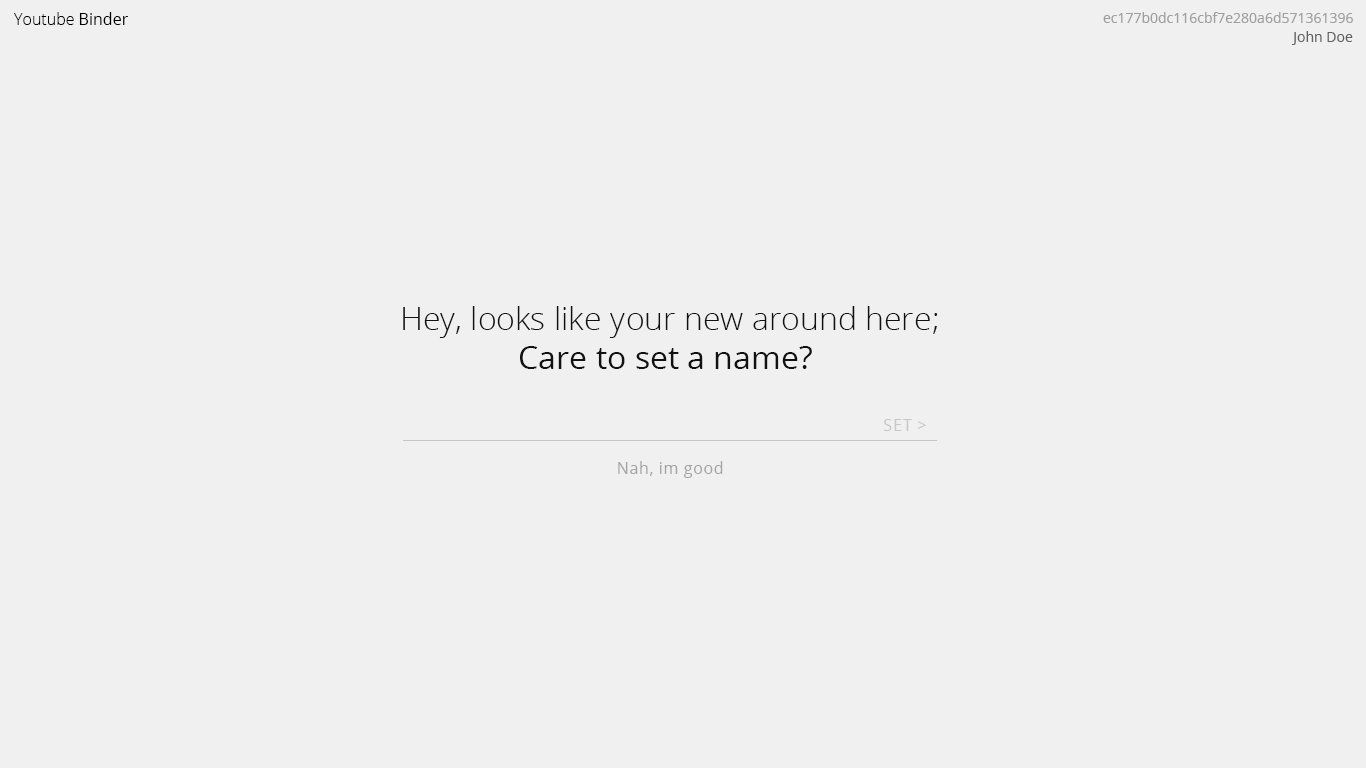
<style>
.page{position:relative;width:1366px;height:768px;background:#f0f0f0}
.page>*{position:absolute;margin:0}
.t1{font:16px "OpenSans-Light";color:#000000}
.t2{font:16px "OpenSans-Regular";color:#000000}
.t3{font:14px "OpenSans-Regular";color:#9f9f9f}
.t4{font:14px "OpenSans-Regular";color:#606060}
.t5{font:32px/32px "OpenSans-Light";color:#121111}
.t6{font:32px/32px "OpenSans-Light";letter-spacing:0.02em;color:#121111}
.t7{font:32px/32px "OpenSans-Regular";color:#121111}
.t8{font:16px "OpenSans-Regular";letter-spacing:0.04em;color:#c7c7c7}
.t9{font:16px "OpenSans-Regular";letter-spacing:0.04em;color:#a3a3a3}
</style>
<div class="page">
<p class="t1" style="left:14px;top:12px;width:114px;height:13px">Youtube <span class="t2">Binder</span></p>
<p class="t3" style="left:1103px;top:12px;width:250px;height:11px">ec177b0dc116cbf7e280a6d571361396</p>
<p class="t4" style="left:1292px;top:31px;width:61px;height:14px">John Doe</p>
<p class="t5" style="left:403px;top:306px;width:535px;height:63px;text-align:center">Hey, looks like <span class="t6">y</span>our new around here;<br><span class="t7">Care to set a name?</span></p>
<p class="t8" style="left:884px;top:419px;width:42px;height:12px">SET &gt;</p>
<p class="t9" style="left:618px;top:461px;width:105px;height:17px">Nah, im good</p>
</div>
